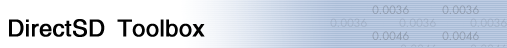
<style>
.page{position:relative;width:507px;height:48px;background:#ffffff}
.page>*{position:absolute;margin:0}
.t1{font:40px "AGHelvetica";color:#010101;font-weight:bold}
</style>
<div class="page">
<p class="t1" style="left:9px;top:19px;width:196px;height:18px">DirectSD Toolbox</p>
</div>
